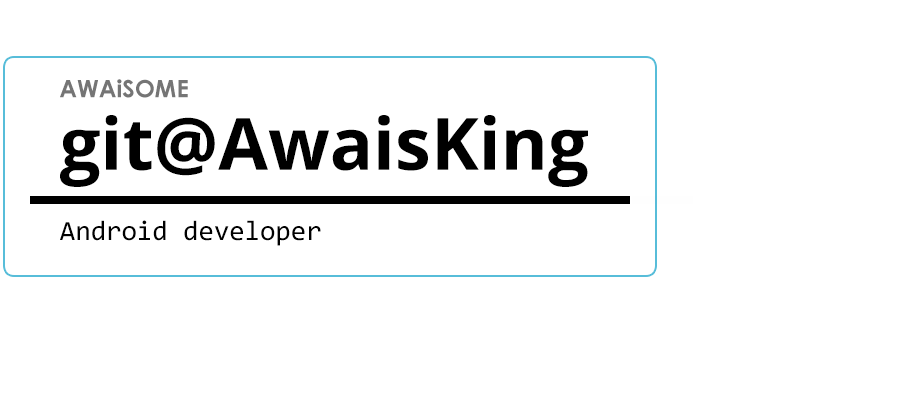
<style>
.page{position:relative;width:900px;height:400px;background:#ffffff}
.page>*{position:absolute;margin:0}
.t1{font:24px "CenturyGothic-Bold";color:#757575}
.t2{font:72px "OpenSans-Bold";color:#000000}
.t3{font:28px "Consolas";color:#000000}
</style>
<div class="page">
<p class="t1" style="left:60px;top:79px;width:128px;height:19px">AWAiSOME</p>
<p class="t2" style="left:60px;top:115px;width:528px;height:72px">git@AwaisKing</p>
<p class="t3" style="left:60px;top:220px;width:261px;height:26px">Android developer</p>
</div>
